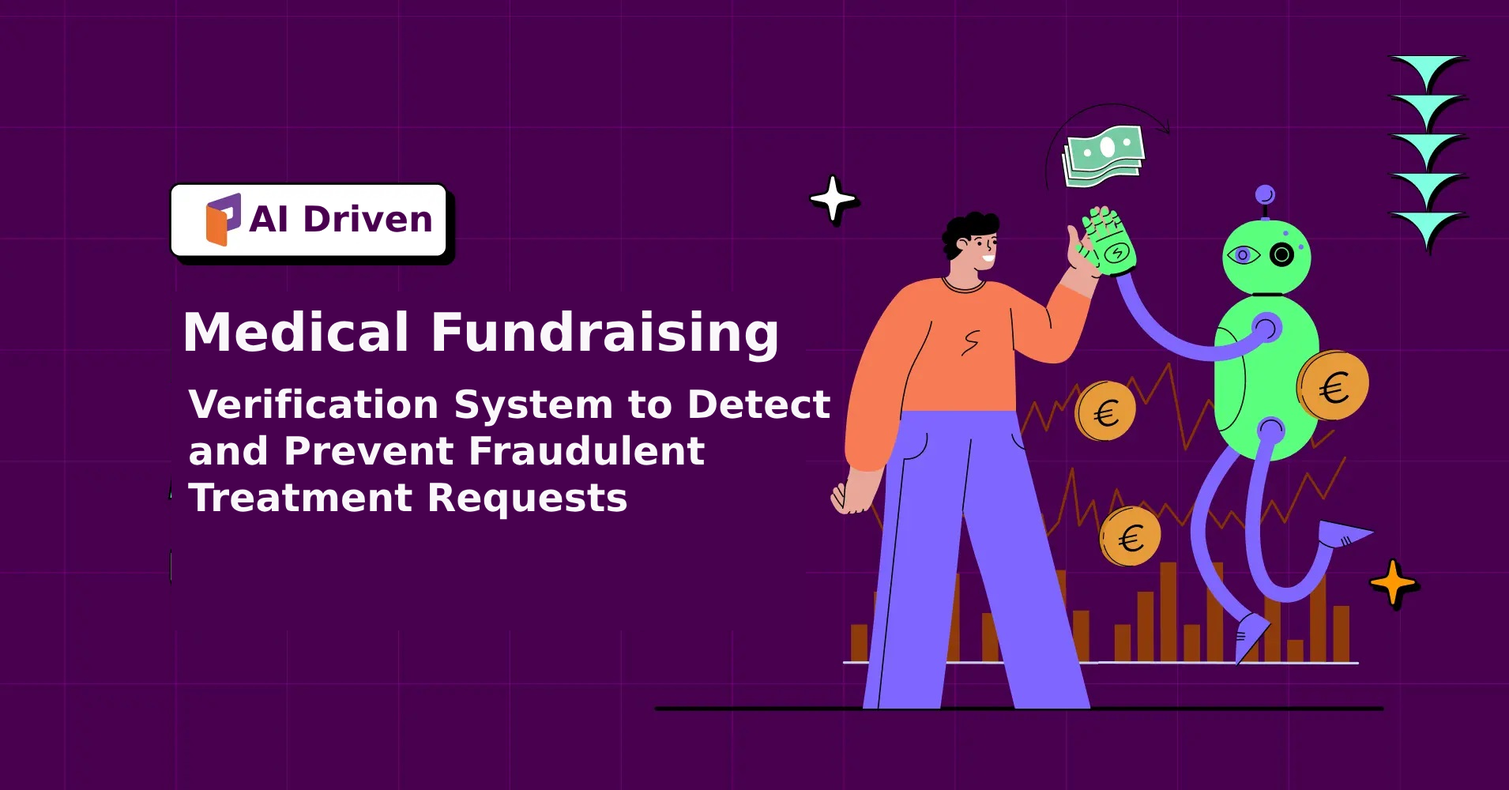
<style>
.page{position:relative;width:1509px;height:790px;background:#49004f}
.page>*{position:absolute;margin:0}
.t1{font:35.6px "DejaVuSans-Bold";color:#49004f}
.t2{font:52.9px "DejaVuSans-Bold";color:#faf7fa}
.t3{font:38.7px "DejaVuSans-Bold";color:#faf7fa}
</style>
<div class="page">
<p class="t1" style="left:249px;top:204px;width:182px;height:28px">AI Driven</p>
<p class="t2" style="left:186px;top:311px;width:591px;height:52px">Medical Fundraising</p>
<p class="t3" style="left:188px;top:388px;width:642px;height:132px">Verification System to Detect<br>and Prevent Fraudulent<br>Treatment Requests</p>
</div>
